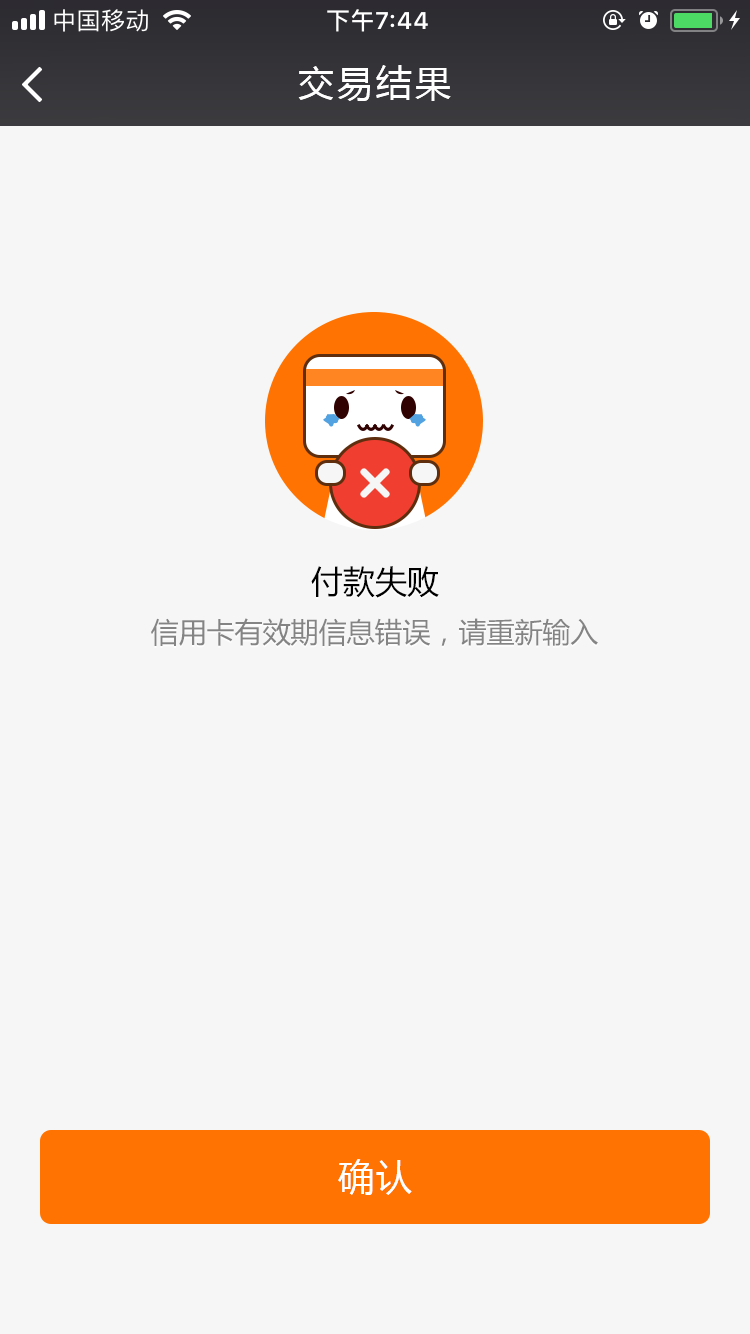
<style>
.page{position:relative;width:750px;height:1334px;background:#f6f6f6}
.page>*{position:absolute;margin:0}
.t1{font:36px "MicrosoftYaHei";letter-spacing:0.08em;color:#ffffff}
.t2{font:32px "MicrosoftYaHei";color:#000000}
.t3{font:28px "MicrosoftYaHei";color:#747474}
</style>
<div class="page">
<p class="t1" style="left:298px;top:65px;width:153px;height:36px">交易结果</p>
<p class="t2" style="left:311px;top:566px;width:128px;height:32px">付款失败</p>
<p class="t3" style="left:151px;top:618px;width:447px;height:28px">信用卡有效期信息错误，请重新输入</p>
<p class="t1" style="left:338px;top:1159px;width:74px;height:36px">确认</p>
</div>
